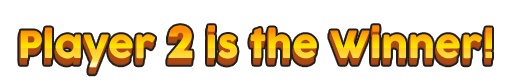
<style>
.page{position:relative;width:512px;height:83px;background:#ffffff}
.page>*{position:absolute;margin:0}
.t1{font:37px "Cocogoose"}
.t2{font:48px "Mont-HeavyDEMO"}
</style>
<div class="page">
<p class="t1" style="left:20px;top:25px;width:472px;height:43px">Player <span class="t2">2</span> is the Winner!</p>
</div>
